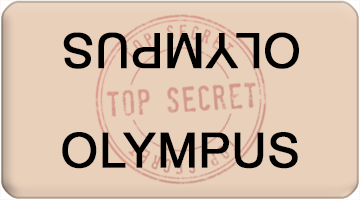
<style>
.page{position:relative;width:360px;height:200px;background:#e8d0bb}
.page>*{position:absolute;margin:0}
.t1{font:48px "ArialMT";color:#000000;font-weight:bold}
</style>
<div class="page">
<p class="t1" style="left:63px;top:32px;width:236px;height:37px;rotate:180deg">OLYMPUS</p>
<p class="t1" style="left:62px;top:132px;width:236px;height:37px">OLYMPUS</p>
</div>
